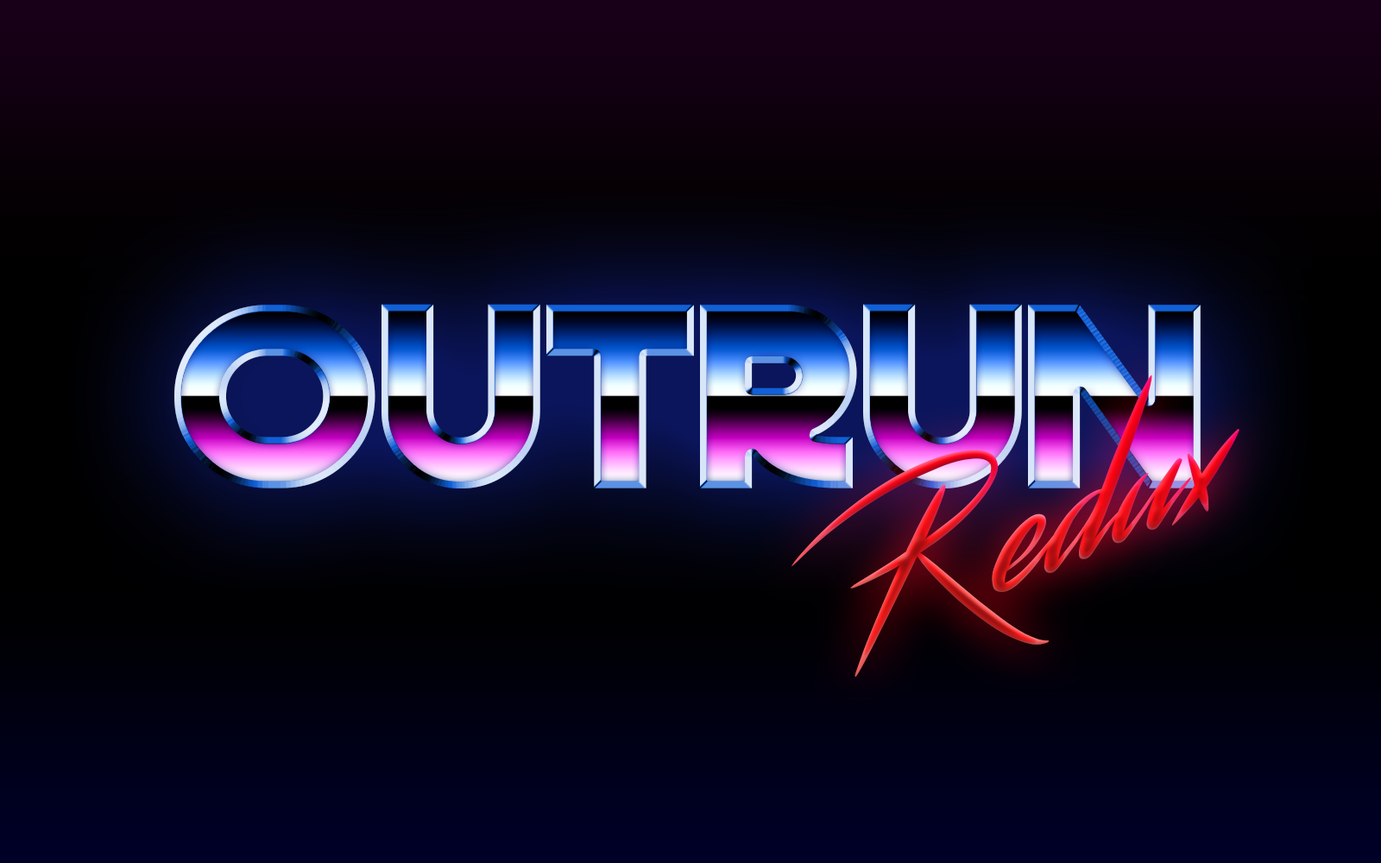
<style>
.page{position:relative;width:1381px;height:863px}
.page>*{position:absolute;margin:0}
.t1{font:259.3px "DeathStar"}
.t2{font:161.8px "Streamster";scale:1.27 1}
</style>
<div class="page">
<p class="t1" style="left:174px;top:304px;width:1027px;height:185px">Outrun</p>
<p class="t2" style="left:792px;top:375px;width:448px;height:303px;rotate:-22deg">Redux</p>
</div>
